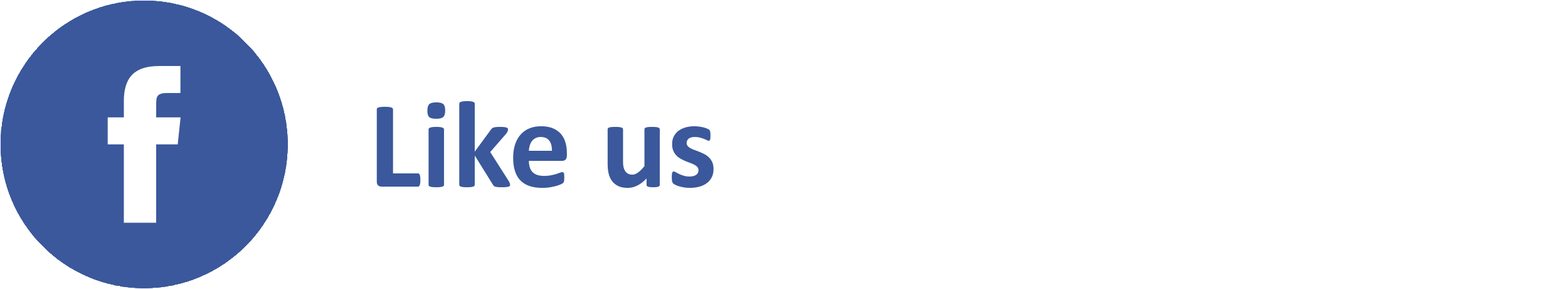
<style>
.page{position:relative;width:1568px;height:289px;background:#ffffff}
.page>*{position:absolute;margin:0}
.t1{font:125.4px "Calibri-Bold";color:#3a589b}
</style>
<div class="page">
<p class="t1" style="left:376px;top:101px;width:338px;height:87px">Like us</p>
</div>
